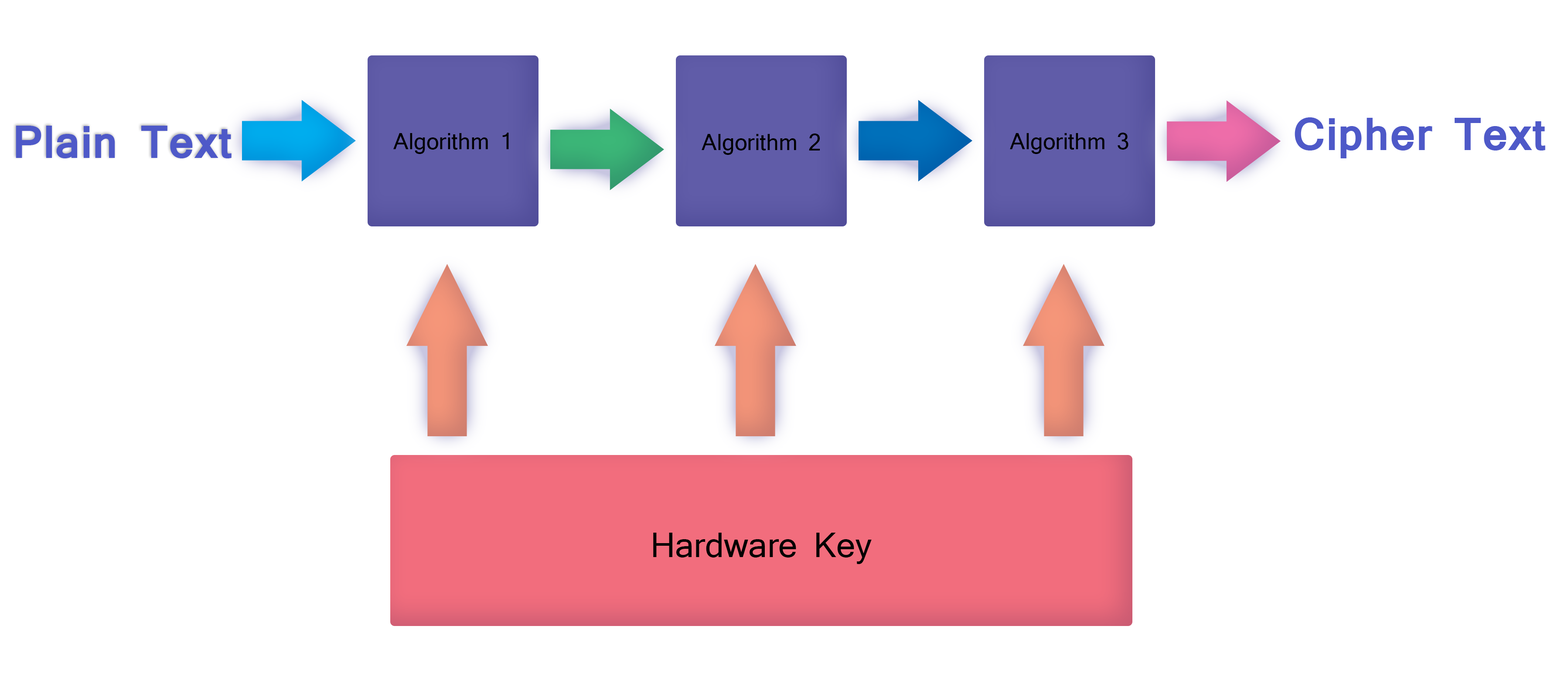
<style>
.page{position:relative;width:1568px;height:691px;background:#ffffff}
.page>*{position:absolute;margin:0}
.t1{font:43.6px "Mangal-Bold";color:#4e59c8}
.t2{font:5.2px "Mangal";color:#000000}
.t3{font:5.2px "MyriadPro-Regular";color:#000000}
.t4{font:32.7px "Mangal";color:#030303}
.t5{font:32.7px "Mangal-Bold";color:#4e59c8}
</style>
<div class="page">
<p class="t1" style="left:16px;top:126px;width:216px;height:32px">Plain Text</p>
<p class="t1" style="left:1295px;top:117px;width:250px;height:41px">Cipher Text</p>
<p class="t2" style="left:393px;top:133px;width:116px;height:21px;text-align:center"><span class="t3"><br><br><br></span>Algorithm 1</p>
<p class="t2" style="left:702px;top:133px;width:118px;height:22px;text-align:center">Algorithm 2</p>
<p class="t2" style="left:1010px;top:133px;width:118px;height:21px;text-align:center"><span class="t3"><br><br><br></span>Algorithm 3</p>
<p class="t4" style="left:653px;top:532px;width:219px;height:32px"><span class="t5"><br></span><br>Hardware Key</p>
</div>
